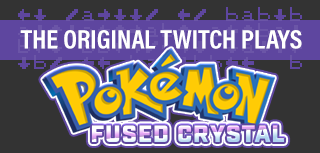
<style>
.page{position:relative;width:320px;height:153px;background:#333333}
.page>*{position:absolute;margin:0}
.t1{font:27px "AcuminProCond-Bold";color:#ffffff}
.t2{font:23.8px "Industry-Ultra";letter-spacing:0.05em;text-transform:uppercase}
</style>
<div class="page">
<p class="t1" style="left:20px;top:30px;width:282px;height:19px">THE ORIGINAL TWITCH PLAYS</p>
<p class="t2" style="left:91px;top:125px;width:194px;height:17px">Fused Crystal</p>
</div>
